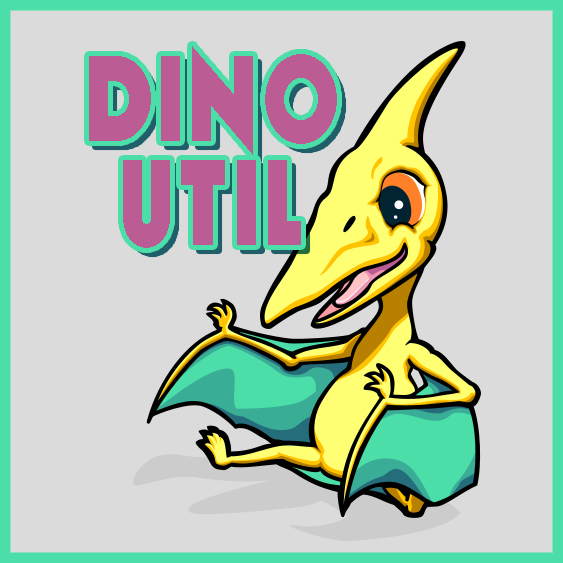
<style>
.page{position:relative;width:563px;height:563px;background:#dbdbdb}
.page>*{position:absolute;margin:0}
.t1{font:120px/51.9px "Geomancy-ExtraBold";letter-spacing:0.05em;color:#bb5d94;scale:0.8 1}
</style>
<div class="page">
<p class="t1" style="left:89px;top:46px;width:248px;height:202px;text-align:center">DINO<br><br>UTIL</p>
</div>
